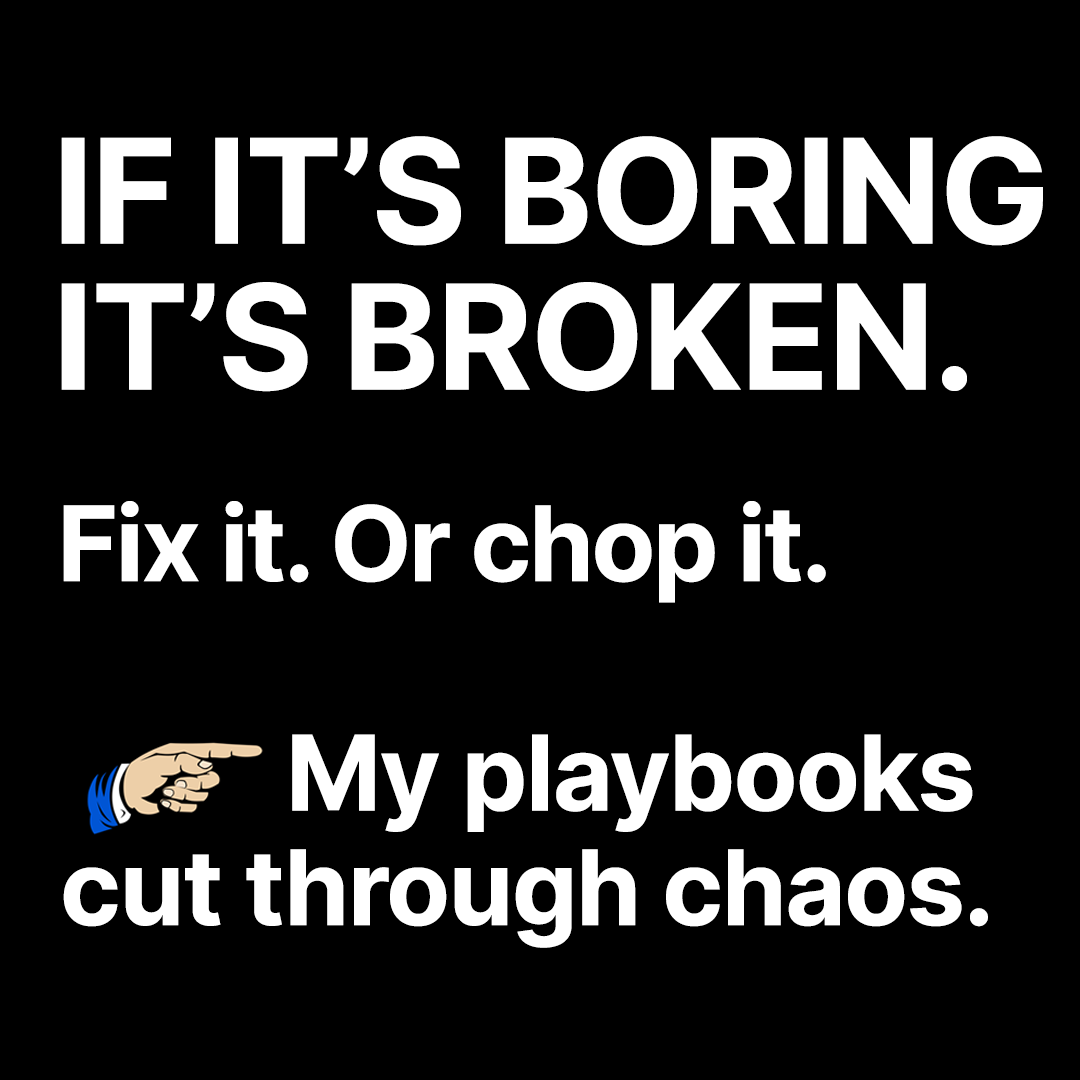
<style>
.page{position:relative;width:1080px;height:1080px;background:#000000}
.page>*{position:absolute;margin:0}
.t1{font:145.8px/145.8px "Inter-Bold";letter-spacing:-0.015em;color:#ffffff}
.t2{font:104.2px "Inter-Bold";letter-spacing:-0.025em;color:#ffffff}
.t3{font:104.2px/114.6px "Inter-Bold";letter-spacing:-0.015em;color:#ffffff}
</style>
<div class="page">
<p class="t1" style="left:61px;top:136px;width:982px;height:256px">IF IT’S BORING<br>IT’S BROKEN.</p>
<p class="t2" style="left:63px;top:501px;width:763px;height:102px">Fix it. Or chop it.</p>
<p class="t3" style="left:63px;top:734px;width:925px;height:214px">My playbooks<br>cut through chaos.</p>
</div>
